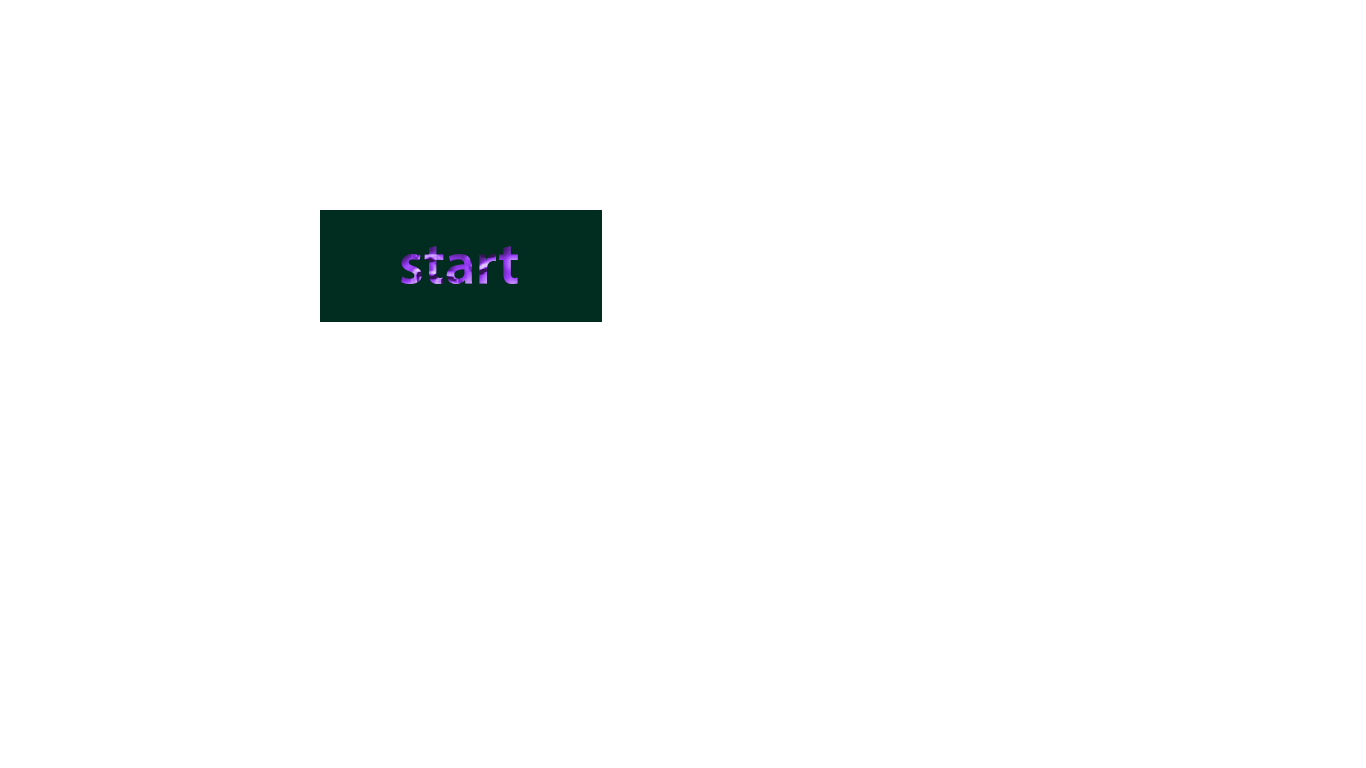
<style>
.page{position:relative;width:1366px;height:768px;background:#ffffff}
.page>*{position:absolute;margin:0}
.t1{font:60px "MyriadPro-Semibold"}
</style>
<div class="page">
<p class="t1" style="left:401px;top:246px;width:117px;height:38px">start</p>
</div>
